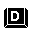
<style>
.page{position:relative;width:32px;height:32px;background:#ffffff}
.page>*{position:absolute;margin:0}
.t1{font:14px "Arial-BoldMT";color:#ffffff}
</style>
<div class="page">
<p class="t1" style="left:11px;top:11px;width:8px;height:10px">D</p>
</div>
